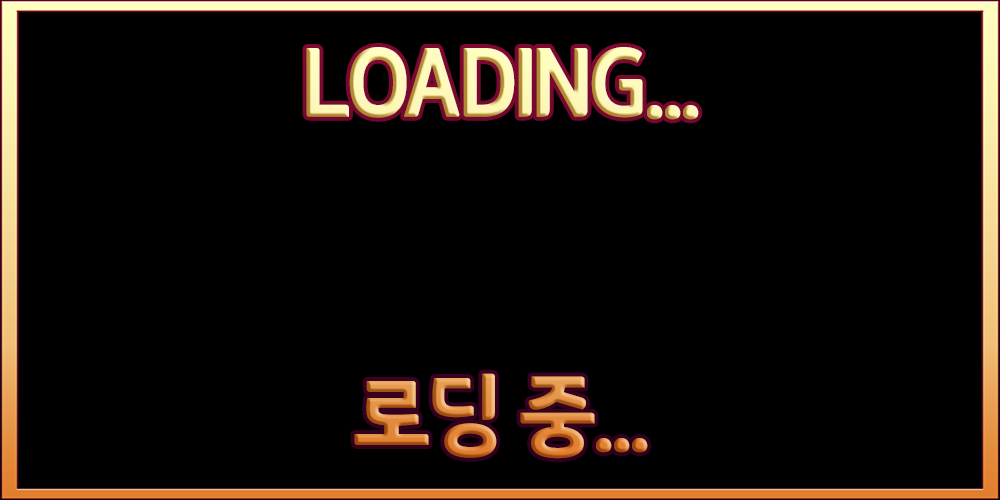
<style>
.page{position:relative;width:1000px;height:500px;background:#000000}
.page>*{position:absolute;margin:0}
.t1{font:100px/33.3px "SDSamliphopangcheTTFBasic";letter-spacing:-0.05em}
.t2{font:50px/33.3px "SDSamliphopangcheTTFBasic";letter-spacing:-0.05em}
</style>
<div class="page">
<p class="t1" style="left:306px;top:47px;width:393px;height:412px;text-align:center"><span class="t2"><br></span><br>LOADING...<br><br><br><br><br><br><br><br><br><br>로딩 중...</p>
</div>
